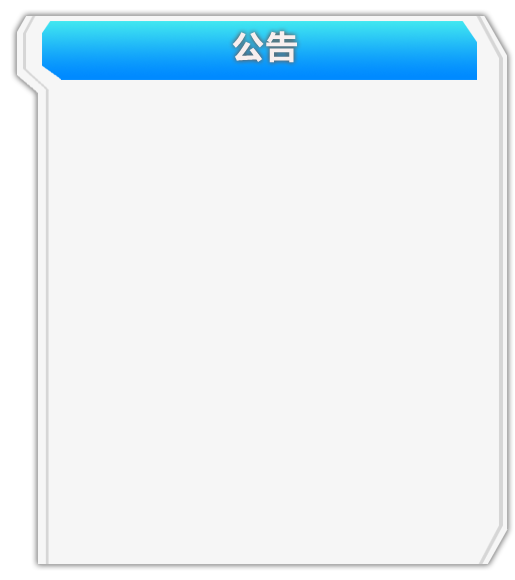
<style>
.page{position:relative;width:515px;height:580px;background:#f6f6f6}
.page>*{position:absolute;margin:0}
.t1{font:32px "MicrosoftYaHei";letter-spacing:0.05em;color:#f8efef}
</style>
<div class="page">
<p class="t1" style="left:232px;top:31px;width:65px;height:32px">公告</p>
</div>
